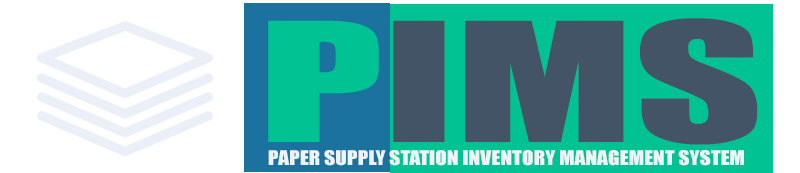
<style>
.page{position:relative;width:800px;height:173px;background:#ffffff}
.page>*{position:absolute;margin:0}
.t1{font:153.3px "Impact";color:#435466;scale:1.63 1}
.t2{font:153.3px "Impact";color:#00c292;scale:1.63 1}
.t3{font:18.8px "Impact";color:#eef3f7;scale:1.14 1}
</style>
<div class="page">
<p class="t1" style="left:268px;top:18px;width:490px;height:127px"><span class="t2">P</span>IMS</p>
<p class="t3" style="left:268px;top:150px;width:476px;height:16px">PAPER SUPPLY STATION INVENTORY MANAGEMENT SYSTEM</p>
</div>
